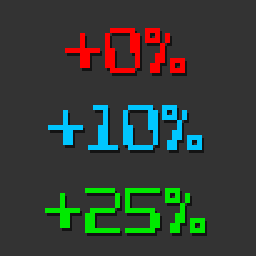
<style>
.page{position:relative;width:256px;height:256px;background:#333333}
.page>*{position:absolute;margin:0}
.t1{font:100.1px "ComputerPixel-7";color:#ff0000}
.t2{font:100.1px "ComputerPixel-7";color:#00c6ff}
.t3{font:100.1px "ComputerPixel-7";color:#00ea00}
</style>
<div class="page">
<p class="t1" style="left:65px;top:28px;width:120px;height:45px">+0%</p>
<p class="t2" style="left:48px;top:105px;width:154px;height:45px">+10%</p>
<p class="t3" style="left:45px;top:188px;width:160px;height:45px">+25%</p>
</div>
